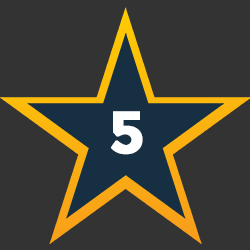
<style>
.page{position:relative;width:250px;height:250px;background:#333333}
.page>*{position:absolute;margin:0}
.t1{font:59.8px "Montserrat-Bold";letter-spacing:0.02em;color:#ffffff;font-weight:bold}
</style>
<div class="page">
<p class="t1" style="left:111px;top:111px;width:32px;height:44px">5</p>
</div>
